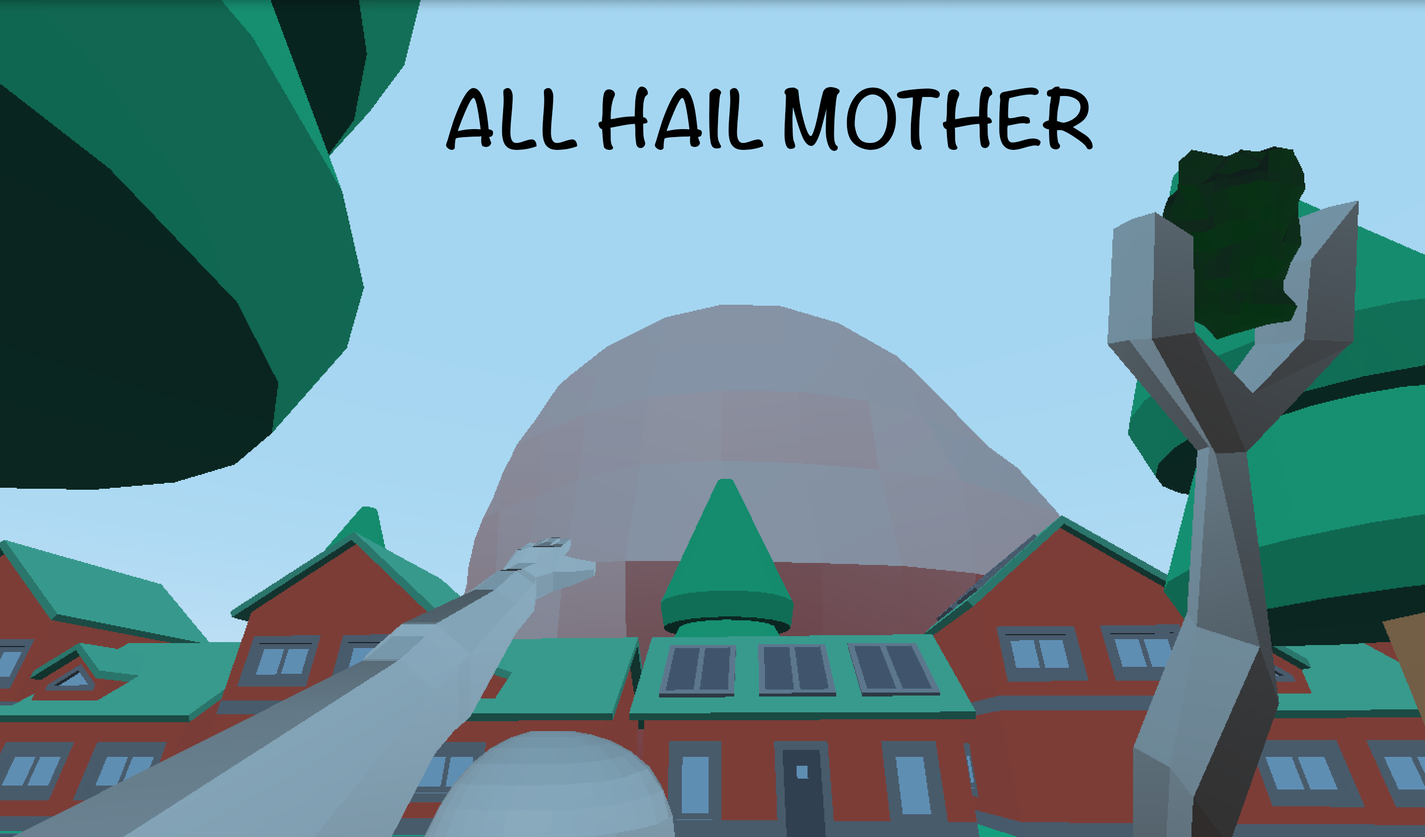
<style>
.page{position:relative;width:1425px;height:837px;background:#a5d6f1}
.page>*{position:absolute;margin:0}
.t1{font:71.2px "Noteworthy-Bold";color:#000000}
</style>
<div class="page">
<p class="t1" style="left:446px;top:87px;width:647px;height:64px">ALL HAIL MOTHER</p>
</div>
